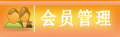
<style>
.page{position:relative;width:120px;height:37px}
.page>*{position:absolute;margin:0}
.t1{font:18px "SimSun";letter-spacing:0.1em;color:#ffffff;font-weight:bold;scale:0.9 1}
</style>
<div class="page">
<p class="t1" style="left:40px;top:9px;width:71px;height:18px">会员管理</p>
</div>
